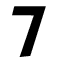
<style>
.page{position:relative;width:64px;height:64px;background:#ffffff}
.page>*{position:absolute;margin:0}
.t1{font:66.7px "(ÇÑ)°¢¸Ó¸®D";color:#000000}
</style>
<div class="page">
<p class="t1" style="left:12px;top:6px;width:34px;height:51px">7</p>
</div>
